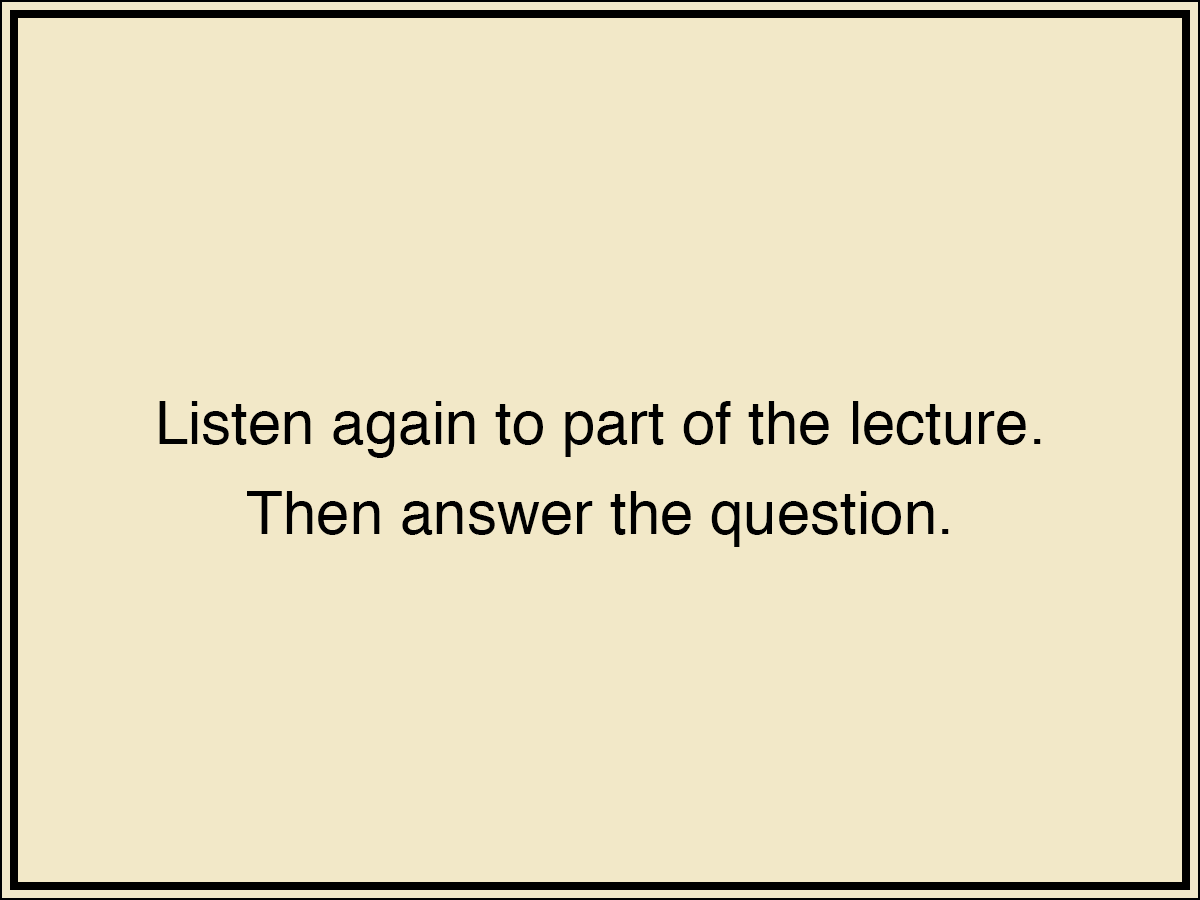
<style>
.page{position:relative;width:1200px;height:900px;background:#f2e8c8}
.page>*{position:absolute;margin:0}
.t1{font:60px/90px "Helvetica"}
.t2{font:60px/90px "Helvetica";color:#000000}
</style>
<div class="page">
<p class="t1" style="left:79px;top:401px;width:1042px;height:146px;text-align:center">Listen again to part of the conversation.<br>Then answer the question.</p>
<p class="t2" style="left:159px;top:401px;width:882px;height:146px;text-align:center">Listen again to part of the lecture.<br>Then answer the question.</p>
</div>
